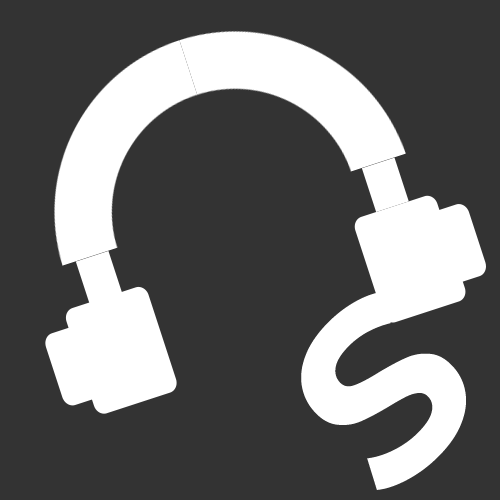
<style>
.page{position:relative;width:500px;height:500px;background:#333333}
.page>*{position:absolute;margin:0}
.t1{font:239px "Montserrat-Bold";color:#ffffff}
</style>
<div class="page">
<p class="t1" style="left:301px;top:292px;width:165px;height:198px;rotate:-45deg">S</p>
</div>
